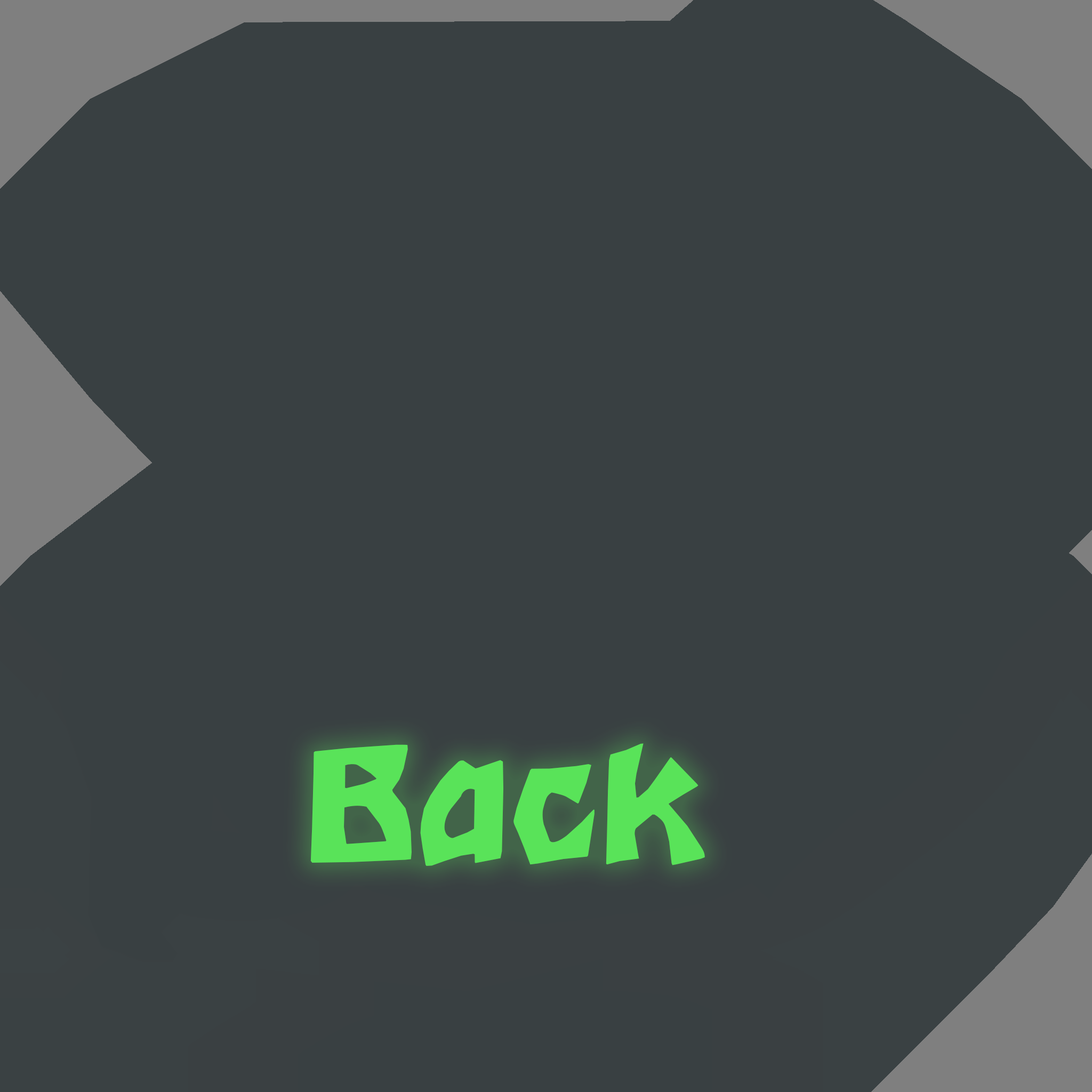
<style>
.page{position:relative;width:1092px;height:1092px;background:#394042}
.page>*{position:absolute;margin:0}
.t1{font:160px "Tarzan";color:#59e359}
</style>
<div class="page">
<p class="t1" style="left:310px;top:743px;width:395px;height:123px">Back</p>
</div>
